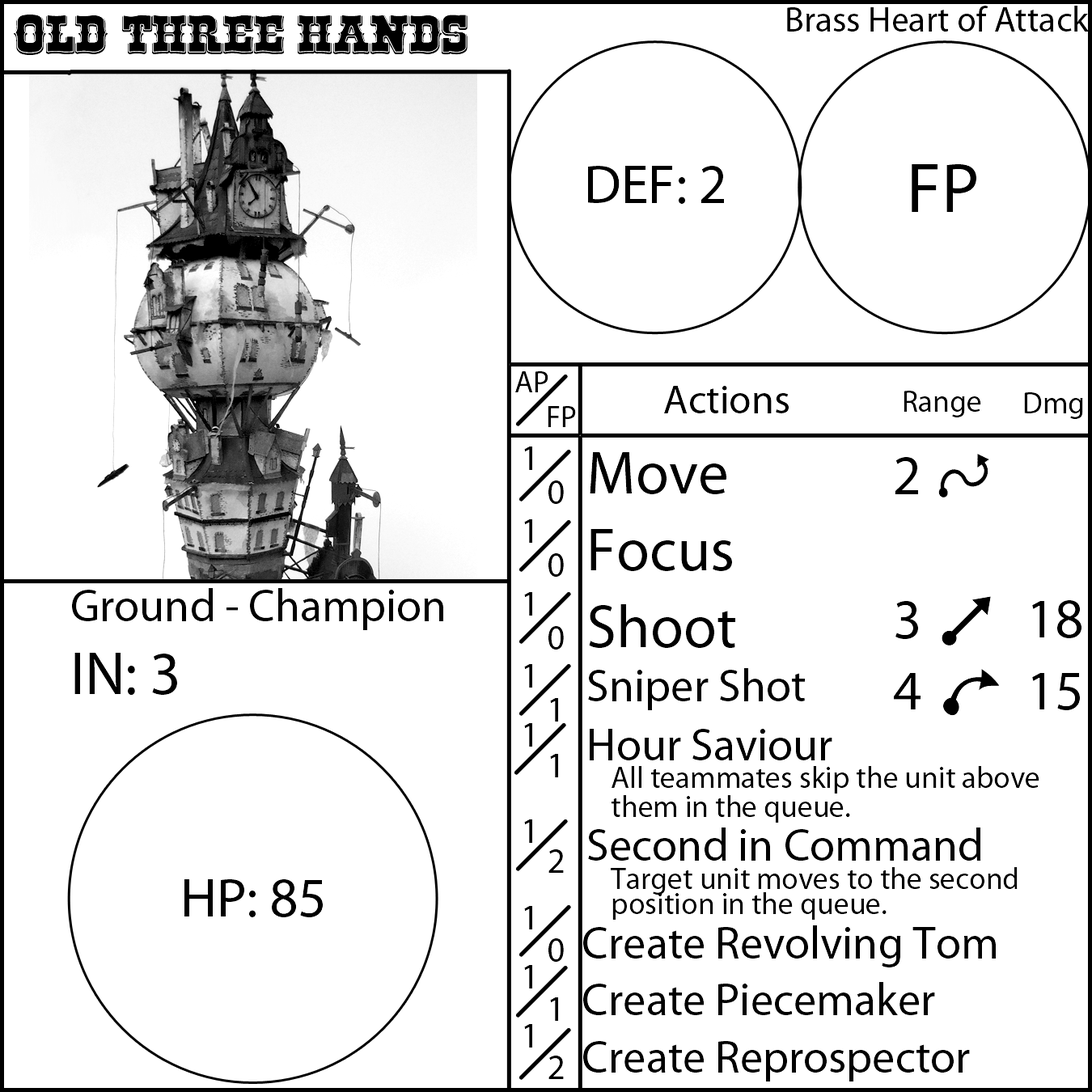
<style>
.page{position:relative;width:1092px;height:1092px;background:#ffffff}
.page>*{position:absolute;margin:0}
.t1{font:35.4px "MyriadPro-Regular";color:#000000}
.t2{font:55.6px "RioGrande-Bold";color:#000000}
.t3{font:55.6px "MyriadPro-Regular";color:#000000}
.t4{font:70.8px "MyriadPro-Regular";color:#000000}
.t5{font:30.3px "MyriadPro-Regular";color:#000000}
.t6{font:40.4px "MyriadPro-Regular";color:#000000}
.t7{font:45.5px "MyriadPro-Regular";color:#000000}
.t8{font:60.7px "MyriadPro-Regular";color:#000000}
</style>
<div class="page">
<p class="t1" style="left:787px;top:6px;width:302px;height:26px">Brass Heart of Attack</p>
<p class="t2" style="left:14px;top:15px;width:454px;height:40px">Old Three Hands</p>
<p class="t3" style="left:588px;top:166px;width:136px;height:38px">DEF: 2</p>
<p class="t4" style="left:912px;top:164px;width:64px;height:48px">FP</p>
<p class="t5" style="left:515px;top:371px;width:33px;height:21px">AP</p>
<p class="t6" style="left:664px;top:386px;width:125px;height:27px">Actions</p>
<p class="t5" style="left:904px;top:391px;width:77px;height:26px">Range</p>
<p class="t5" style="left:1024px;top:392px;width:59px;height:27px">Dmg</p>
<p class="t5" style="left:548px;top:406px;width:28px;height:21px">FP</p>
<p class="t1" style="left:524px;top:447px;width:8px;height:600px">1<br>1<br>1<br>1<br>1<br>1<br>1<br>1<br>1</p>
<p class="t7" style="left:583px;top:452px;width:456px;height:629px"><span class="t8">Move<br>Focus<br>Shoot<br></span>Sniper Shot<br>Hour Saviour<br><span class="t5"> All teammates skip the unit above<br> them in the queue.<br></span>Second in Command<br><span class="t5"> Target unit moves to the second <br> position in the queue.<br></span>Create Revolving Tom<br>Create Piecemaker<br>Create Reprospector</p>
<p class="t3" style="left:894px;top:457px;width:27px;height:252px;text-align:center">2<br><br>3<br>4</p>
<p class="t1" style="left:548px;top:480px;width:16px;height:599px">0<br>0<br>0<br>1<br>1<br>2<br>0<br>1<br>2</p>
<p class="t7" style="left:72px;top:588px;width:371px;height:107px">Ground - Champion<br><span class="t8">IN: 3</span></p>
<p class="t3" style="left:1032px;top:600px;width:49px;height:110px;text-align:center">18<br>15</p>
<p class="t3" style="left:184px;top:879px;width:139px;height:38px">HP: 85</p>
</div>
